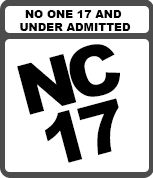
<style>
.page{position:relative;width:153px;height:178px;background:#ffffff}
.page>*{position:absolute;margin:0}
.t1{font:11px "Arial-Black";color:#000000}
.t2{font:70px/57px "Arial-Black";letter-spacing:-0.1em;color:#000000}
</style>
<div class="page">
<p class="t1" style="left:20px;top:10px;width:111px;height:21px;text-align:center">NO ONE 17 AND <br>UNDER ADMITTED</p>
<p class="t2" style="left:17px;top:44px;width:103px;height:119px;text-align:center;rotate:-15deg">NC<br>17</p>
</div>
